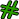
<style>
.page{position:relative;width:19px;height:19px;background:#ffffff}
.page>*{position:absolute;margin:0}
.t1{font:21px "CalifornianFB-Bold";color:#2aa000;font-weight:bold;scale:1.37 1}
</style>
<div class="page">
<p class="t1" style="left:1px;top:1px;width:17px;height:18px">#</p>
</div>
